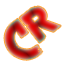
<style>
.page{position:relative;width:64px;height:64px;background:#ffffff}
.page>*{position:absolute;margin:0}
.t1{font:40px "FarCryExtraBold"}
</style>
<div class="page">
<p class="t1" style="left:19px;top:6px;width:42px;height:37px;rotate:-38deg">R</p>
<p class="t1" style="left:4px;top:18px;width:39px;height:42px;rotate:-36deg">C</p>
</div>
